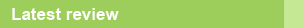
<style>
.page{position:relative;width:303px;height:28px;background:#9dce5c}
.page>*{position:absolute;margin:0}
.t1{font:17px "Arial-BoldMT";color:#ffffff}
</style>
<div class="page">
<p class="t1" style="left:12px;top:8px;width:107px;height:12px">Latest review</p>
</div>
